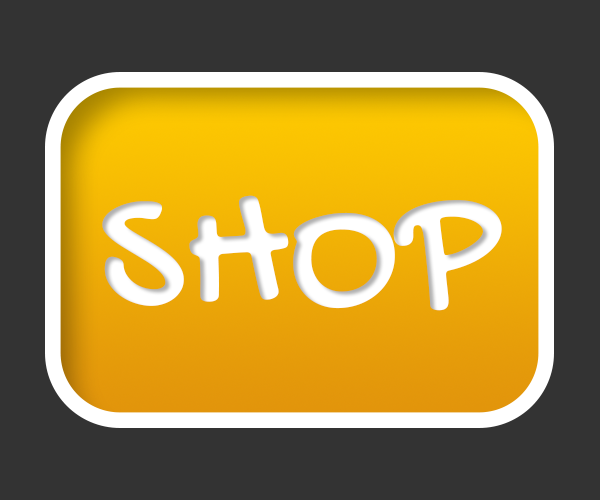
<style>
.page{position:relative;width:600px;height:500px;background:#333333}
.page>*{position:absolute;margin:0}
.t1{font:183.8px "GochiHand-Regular";color:#ffffff}
</style>
<div class="page">
<p class="t1" style="left:102px;top:195px;width:400px;height:116px;rotate:-1deg">SHOP</p>
</div>
